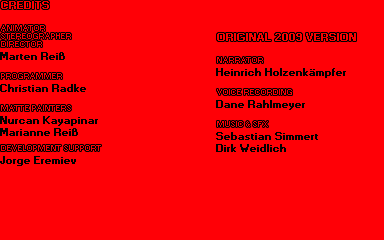
<style>
.page{position:relative;width:384px;height:240px;background:#ff0006}
.page>*{position:absolute;margin:0}
.t1{font:10px "Small Fonts";color:#ff0000;text-transform:uppercase;font-weight:bold}
.t2{font:8px/8px "Small Fonts";color:#ff0006;text-transform:uppercase}
.t3{font:10px "Small Fonts";color:#000000;font-weight:bold}
.t4{font:8px "Small Fonts";color:#ff0006;text-transform:uppercase}
</style>
<div class="page">
<p class="t1" style="left:1px;top:1px;width:48px;height:8px">Credits</p>
<p class="t2" style="left:1px;top:25px;width:70px;height:22px">Animator<br>Stereographer<br>Director</p>
<p class="t1" style="left:217px;top:33px;width:139px;height:8px">ORIGINAL 2009 VERSION</p>
<p class="t3" style="left:0px;top:52px;width:65px;height:8px">Marten Reiß</p>
<p class="t4" style="left:217px;top:57px;width:46px;height:6px">Narrator</p>
<p class="t4" style="left:1px;top:73px;width:61px;height:6px">Programmer</p>
<p class="t3" style="left:216px;top:68px;width:130px;height:10px">Heinrich Holzenkämpfer</p>
<p class="t3" style="left:0px;top:84px;width:86px;height:8px">Christian Radke</p>
<p class="t4" style="left:217px;top:89px;width:75px;height:6px">Voice Recording</p>
<p class="t3" style="left:216px;top:100px;width:89px;height:10px">Dane Rahlmeyer</p>
<p class="t4" style="left:1px;top:105px;width:70px;height:6px">Matte Painters</p>
<p class="t3" style="left:0px;top:116px;width:98px;height:10px">Nurcan Kayapinar</p>
<p class="t4" style="left:217px;top:121px;width:51px;height:6px">Music &amp; SFX</p>
<p class="t3" style="left:0px;top:128px;width:78px;height:8px">Marianne Reiß</p>
<p class="t3" style="left:216px;top:132px;width:102px;height:8px">Sebastian Simmert</p>
<p class="t4" style="left:1px;top:145px;width:100px;height:6px">Development Support</p>
<p class="t3" style="left:216px;top:144px;width:70px;height:8px">Dirk Weidlich</p>
<p class="t3" style="left:0px;top:156px;width:76px;height:10px">Jorge Eremiev</p>
</div>
